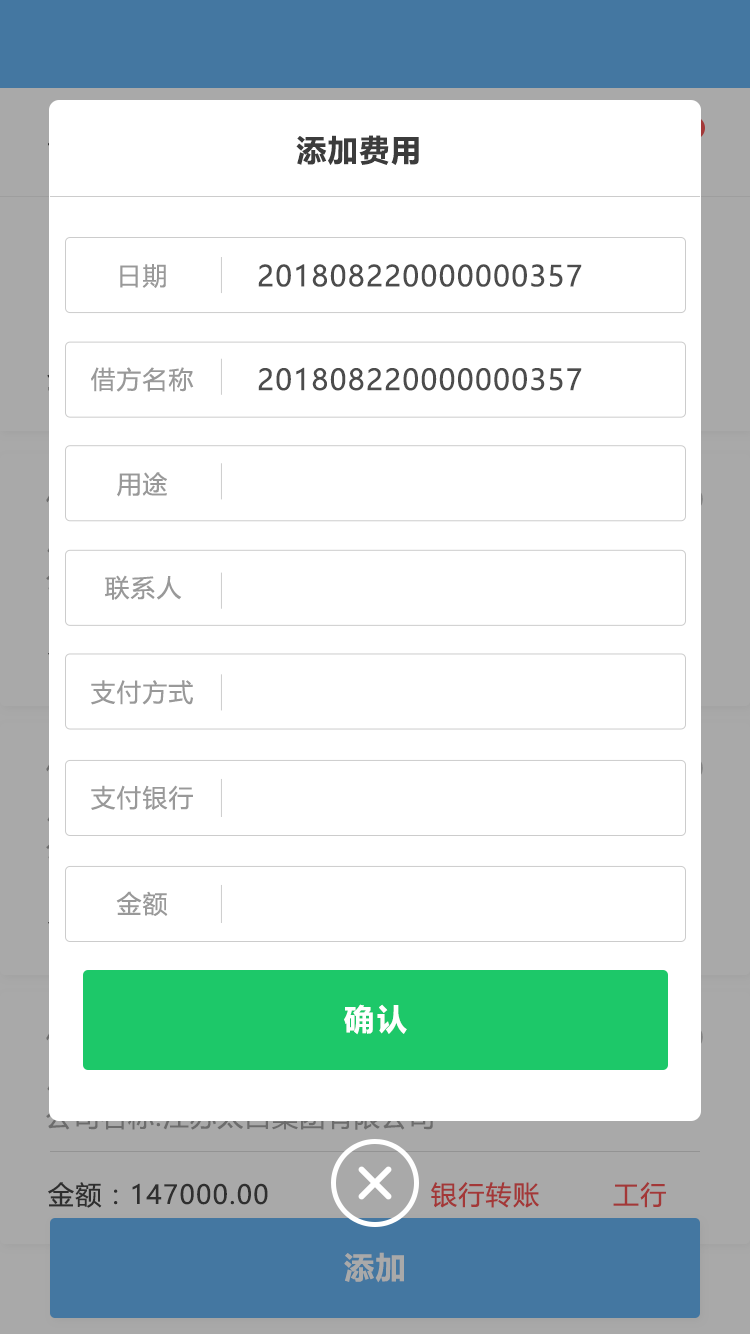
<style>
.page{position:relative;width:750px;height:1334px;background:#ffffff}
.page>*{position:absolute;margin:0}
.t1{font:30px "MicrosoftYaHeiUI-Bold";letter-spacing:0.05em;color:#3c3c3c}
.t2{font:24.7px "MicrosoftYaHeiUI";letter-spacing:0.05em;color:#999999}
.t3{font:28.5px "MicrosoftYaHeiUI";letter-spacing:0.05em;color:#4c4c4c}
.t4{font:30px "MicrosoftYaHeiUI-Bold";letter-spacing:0.1em;color:#ffffff}
.t5{font:26px "MicrosoftYaHeiUI";letter-spacing:0.05em;color:#333333}
.t6{font:26px "MicrosoftYaHeiUI";letter-spacing:0.05em;color:#a33838}
.t7{font:30px "MicrosoftYaHeiUI-Bold";letter-spacing:0.05em;color:#a9a9a9}
</style>
<div class="page">
<p class="t1" style="left:296px;top:135px;width:123px;height:30px">添加费用</p>
<p class="t2" style="left:120px;top:264px;width:46px;height:24px">日期</p>
<p class="t3" style="left:258px;top:264px;width:324px;height:23px">201808220000000357</p>
<p class="t2" style="left:91px;top:367px;width:103px;height:25px">借方名称</p>
<p class="t3" style="left:258px;top:367px;width:324px;height:24px">201808220000000357</p>
<p class="t2" style="left:117px;top:472px;width:50px;height:25px">用途</p>
<p class="t2" style="left:105px;top:575px;width:77px;height:25px">联系人</p>
<p class="t2" style="left:91px;top:680px;width:102px;height:25px">支付方式</p>
<p class="t2" style="left:91px;top:785px;width:102px;height:25px">支付银行</p>
<p class="t2" style="left:116px;top:891px;width:52px;height:25px">金额</p>
<p class="t4" style="left:344px;top:1004px;width:63px;height:31px">确认</p>
<p class="t5" style="left:48px;top:1182px;width:220px;height:26px">金额：147000.00</p>
<p class="t6" style="left:431px;top:1182px;width:108px;height:26px">银行转账</p>
<p class="t6" style="left:613px;top:1182px;width:53px;height:26px">工行</p>
<p class="t7" style="left:344px;top:1252px;width:60px;height:31px">添加</p>
</div>
